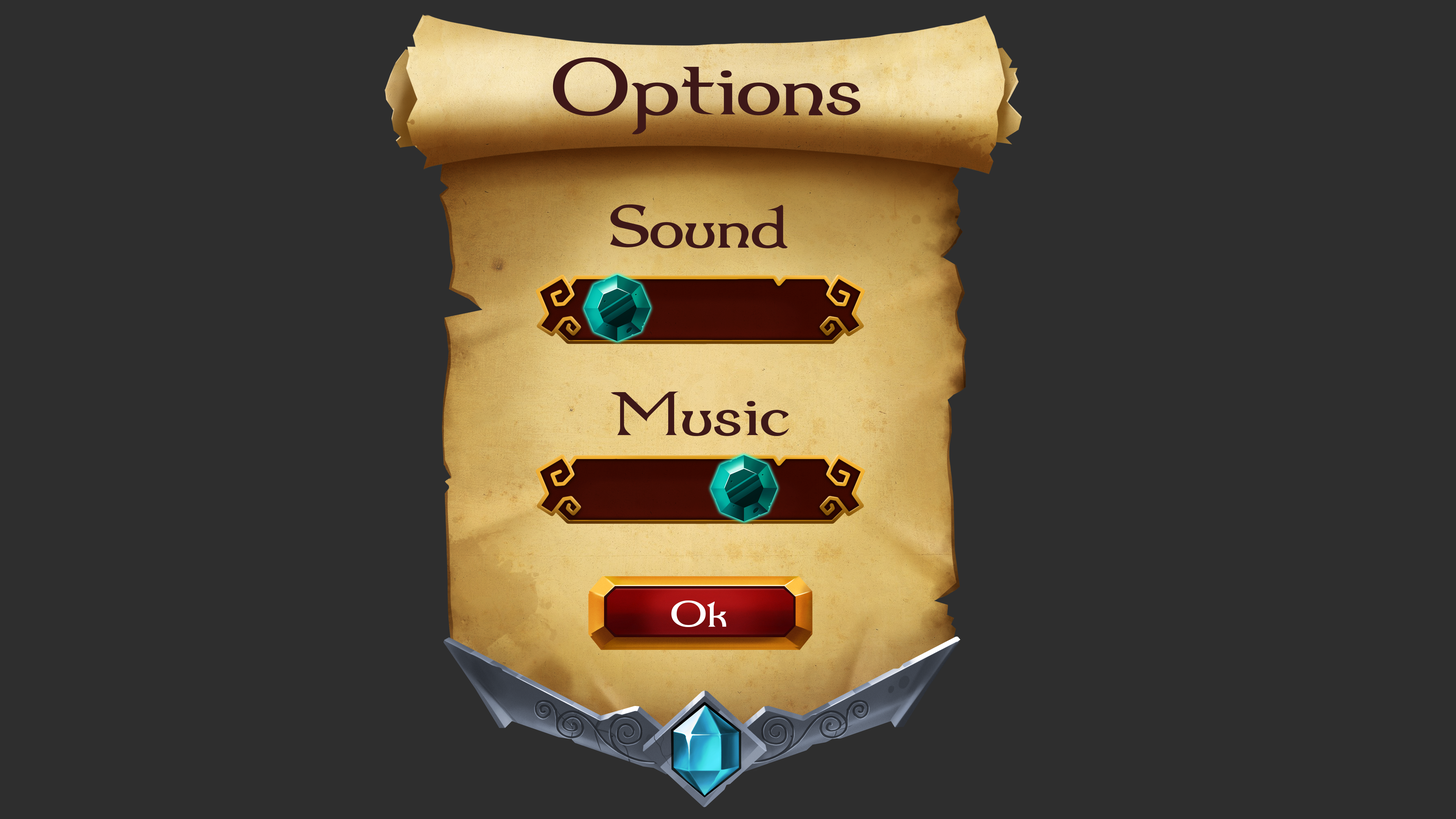
<style>
.page{position:relative;width:1456px;height:819px;background:#2e2e2e}
.page>*{position:absolute;margin:0}
.t1{font:92.4px "Dumbledor1";color:#3e1818;scale:1.18 1}
.t2{font:71.7px "Dumbledor1";color:#3e1818;scale:1.18 1}
.t3{font:42.4px "Dumbledor1";color:#ffffff;scale:1.18 1}
</style>
<div class="page">
<p class="t1" style="left:553px;top:57px;width:308px;height:77px">Options</p>
<p class="t2" style="left:610px;top:204px;width:178px;height:45px">Sound</p>
<p class="t2" style="left:611px;top:391px;width:179px;height:45px">Music</p>
<p class="t3" style="left:671px;top:600px;width:55px;height:27px">Ok</p>
</div>
